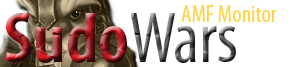
<style>
.page{position:relative;width:300px;height:67px;background:#ffffff}
.page>*{position:absolute;margin:0}
.t1{font:24px "MyriadPro-Cond";color:#ffd342}
.t2{font:72px "MyriadPro-BoldCond"}
.t3{font:72px "MyriadPro-Cond"}
</style>
<div class="page">
<p class="t1" style="left:181px;top:5px;width:96px;height:17px">AMF Monitor</p>
<p class="t2" style="left:5px;top:13px;width:231px;height:50px">Sudo<span class="t3">Wars</span></p>
</div>
